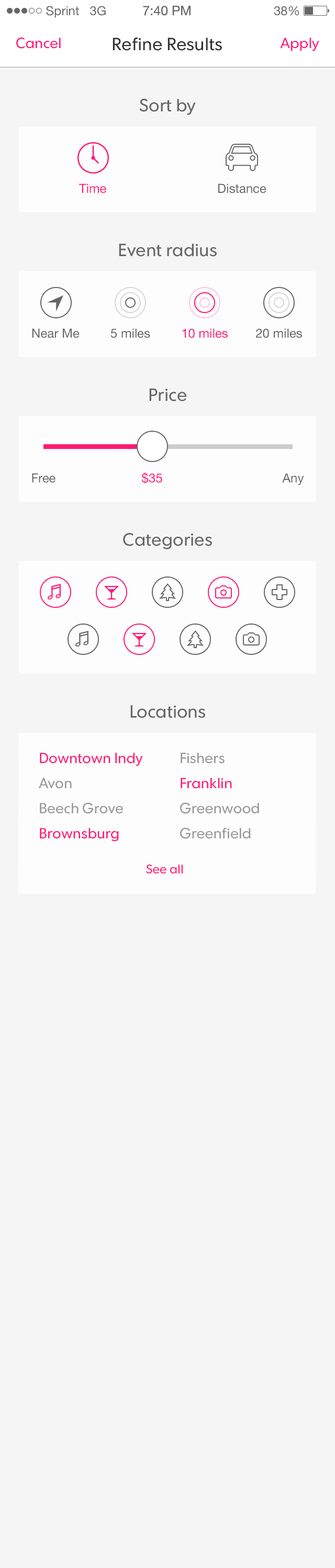
<style>
.page{position:relative;width:335px;height:1568px;background:#f5f5f5}
.page>*{position:absolute;margin:0}
.t1{font:12.5px "HelveticaNeue";color:#666666}
.t2{font:13.1px "HelveticaNeue";color:#666666}
.t3{font:14.6px "FuturaToday-Normal";color:#ff1975}
.t4{font:17.8px "FuturaToday-Normal";color:#333333}
.t5{font:17.8px "FuturaToday-Normal";color:#666666}
.t6{font:12.5px "HelveticaNeue";color:#ff1975}
.t7{font:14.6px/25.1px "FuturaToday-Normal";color:#999999}
.t8{font:14.6px/25.1px "FuturaToday-Normal";color:#ff1975}
.t9{font:12.5px "FuturaToday-Normal";color:#ff1975}
</style>
<div class="page">
<p class="t1" style="left:46px;top:6px;width:60px;height:12px">Sprint   3G</p>
<p class="t2" style="left:143px;top:6px;width:47px;height:10px">7:40 PM</p>
<p class="t1" style="left:273px;top:6px;width:26px;height:10px">38%</p>
<p class="t3" style="left:16px;top:37px;width:45px;height:12px">Cancel</p>
<p class="t4" style="left:112px;top:37px;width:110px;height:14px">Refine Results</p>
<p class="t3" style="left:280px;top:38px;width:39px;height:13px">Apply</p>
<p class="t5" style="left:139px;top:98px;width:56px;height:17px">Sort by</p>
<p class="t6" style="left:79px;top:183px;width:27px;height:10px">Time</p>
<p class="t1" style="left:218px;top:183px;width:48px;height:10px">Distance</p>
<p class="t5" style="left:119px;top:244px;width:97px;height:13px">Event radius</p>
<p class="t1" style="left:32px;top:328px;width:47px;height:10px">Near Me</p>
<p class="t1" style="left:110px;top:328px;width:40px;height:10px">5 miles</p>
<p class="t6" style="left:182px;top:328px;width:45px;height:10px">10 miles</p>
<p class="t1" style="left:256px;top:328px;width:46px;height:10px">20 miles</p>
<p class="t5" style="left:149px;top:388px;width:38px;height:13px">Price</p>
<p class="t1" style="left:32px;top:473px;width:23px;height:10px">Free</p>
<p class="t6" style="left:142px;top:472px;width:20px;height:12px">$35</p>
<p class="t1" style="left:282px;top:473px;width:22px;height:12px">Any</p>
<p class="t5" style="left:123px;top:533px;width:89px;height:16px">Categories</p>
<p class="t5" style="left:130px;top:705px;width:75px;height:13px">Locations</p>
<p class="t7" style="left:39px;top:753px;width:104px;height:88px"><span class="t8">Downtown Indy<br></span>Avon<br>Beech Grove<br><span class="t8">Brownsburg</span></p>
<p class="t7" style="left:180px;top:753px;width:79px;height:86px">Fishers<br><span class="t8">Franklin<br></span>Greenwood<br>Greenfield</p>
<p class="t9" style="left:146px;top:864px;width:36px;height:10px">See all</p>
</div>
